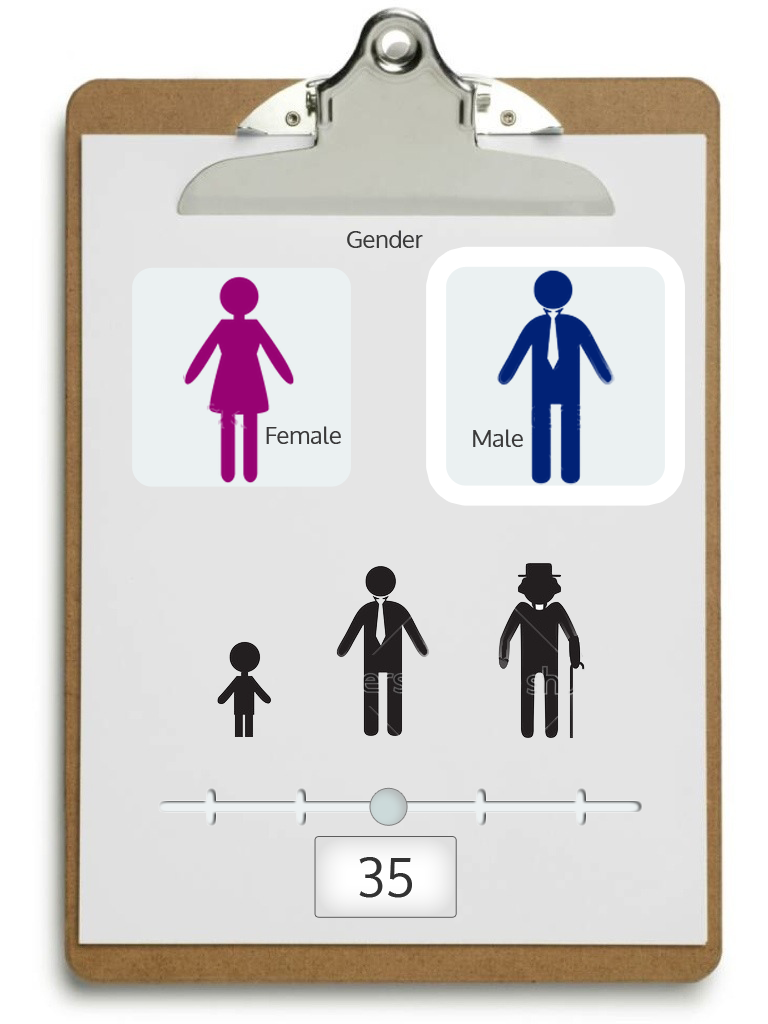
<style>
.page{position:relative;width:768px;height:1024px}
.page>*{position:absolute;margin:0}
.t1{font:24px "Oxygen";color:#3a3a3a}
.t2{font:52px "Oxygen";color:#323232}
</style>
<div class="page">
<p class="t1" style="left:347px;top:230px;width:76px;height:18px">Gender</p>
<p class="t1" style="left:266px;top:426px;width:75px;height:18px">Female</p>
<p class="t1" style="left:473px;top:429px;width:50px;height:18px">Male</p>
<p class="t2" style="left:359px;top:857px;width:53px;height:41px">35</p>
</div>
